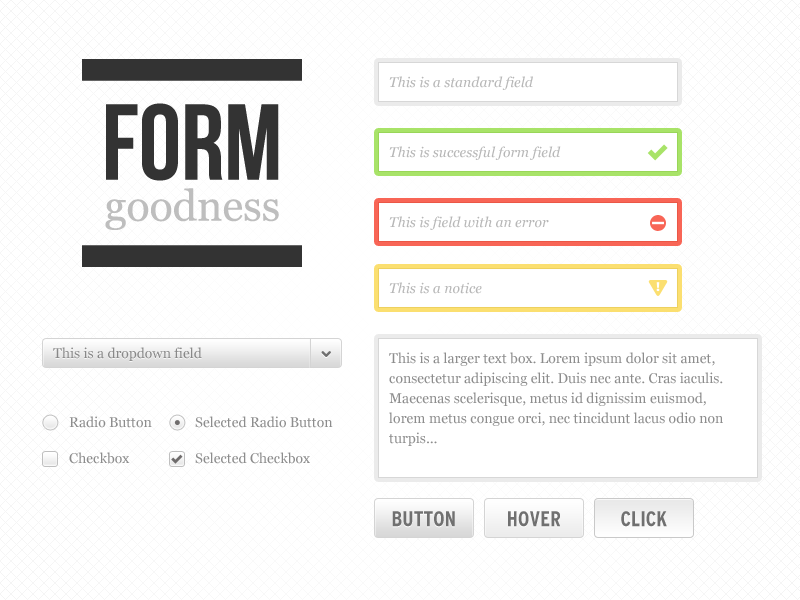
<style>
.page{position:relative;width:800px;height:600px;background:#ffffff}
.page>*{position:absolute;margin:0}
.t1{font:14px "Georgia-Italic";color:#b7b7b7}
.t2{font:14px "Georgia";color:#888888}
.t3{font:14px/20px "Georgia";color:#8d8d8d}
.t4{font:14px "Georgia";color:#8d8d8d}
.t5{font:21px "InterstateCondensedBold";color:#707070}
</style>
<div class="page">
<p class="t1" style="left:389px;top:76px;width:144px;height:14px">This is a standard field</p>
<p class="t1" style="left:389px;top:146px;width:172px;height:14px">This is successful form field</p>
<p class="t1" style="left:389px;top:216px;width:160px;height:14px">This is field with an error</p>
<p class="t1" style="left:389px;top:282px;width:93px;height:12px">This is a notice</p>
<p class="t2" style="left:53px;top:347px;width:149px;height:14px">This is a dropdown field</p>
<p class="t3" style="left:389px;top:352px;width:334px;height:94px">This is a larger text box. Lorem ipsum dolor sit amet, consectetur adipiscing elit. Duis nec ante. Cras iaculis. Maecenas scelerisque, metus id dignissim euismod, lorem metus congue orci, nec tincidunt lacus odio non turpis...</p>
<p class="t4" style="left:69px;top:416px;width:83px;height:12px">Radio Button</p>
<p class="t4" style="left:195px;top:416px;width:138px;height:12px">Selected Radio Button</p>
<p class="t4" style="left:69px;top:452px;width:61px;height:12px">Checkbox</p>
<p class="t4" style="left:195px;top:452px;width:115px;height:12px">Selected Checkbox</p>
<p class="t5" style="left:392px;top:511px;width:63px;height:16px">BUTTON</p>
<p class="t5" style="left:508px;top:511px;width:52px;height:16px">HOVER</p>
<p class="t5" style="left:621px;top:511px;width:46px;height:16px">CLICK</p>
</div>
